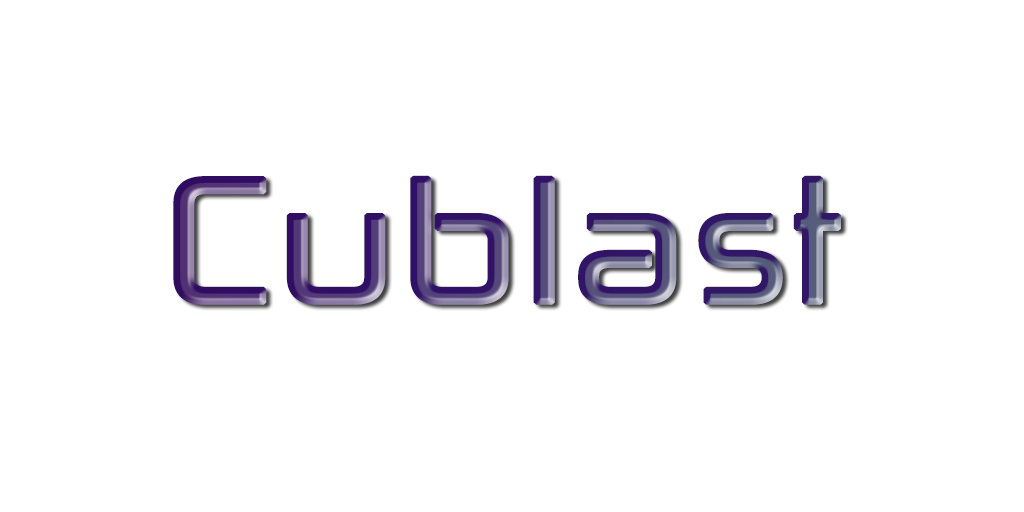
<style>
.page{position:relative;width:1024px;height:512px;background:#ffffff}
.page>*{position:absolute;margin:0}
.t1{font:170px "ZektonRg-Regular";font-weight:bold;scale:1.16 1}
</style>
<div class="page">
<p class="t1" style="left:173px;top:175px;width:668px;height:130px">Cublast</p>
</div>
